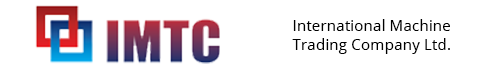
<style>
.page{position:relative;width:503px;height:76px;background:#ffffff}
.page>*{position:absolute;margin:0}
.t1{font:15.4px "OpenSans";color:#000000}
</style>
<div class="page">
<p class="t1" style="left:292px;top:19px;width:158px;height:35px;text-align:center">International Machine<br>Trading Company Ltd.</p>
</div>
